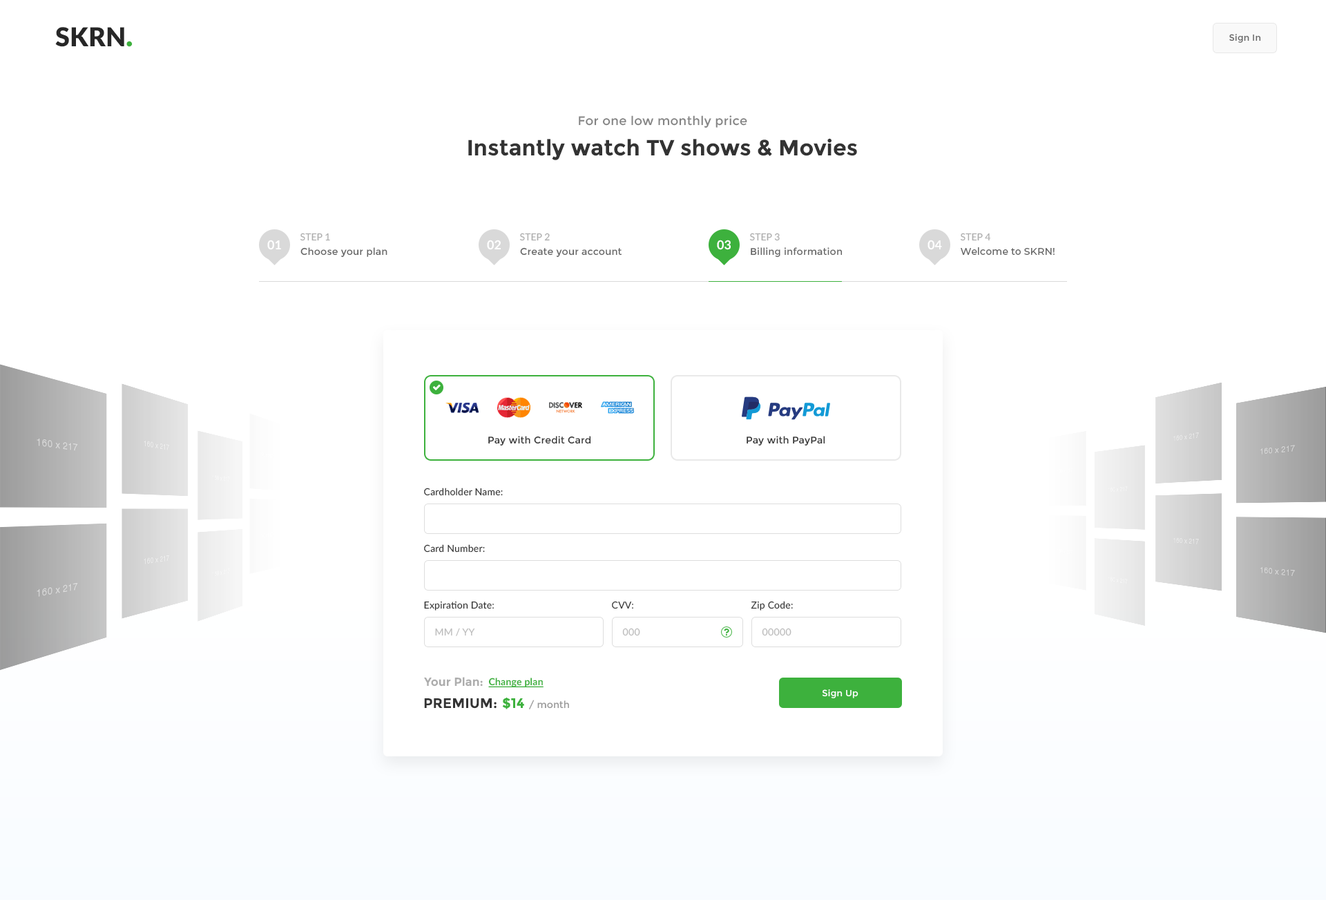
<style>
.page{position:relative;width:1326px;height:900px;background:#ffffff}
.page>*{position:absolute;margin:0}
.t1{font:26px "Lato-Black";color:#272727}
.t2{font:30.4px "Lato-Black";color:#3db13d}
.t3{font:9px "Montserrat-Regular";letter-spacing:0.02em;color:#666666}
.t4{font:12.4px "Montserrat-Regular";letter-spacing:0.017em;color:#848484}
.t5{font:22.1px "Montserrat-Bold";color:#333333}
.t6{font:9.7px "Lato-Regular";color:#adadad}
.t7{font:12.4px "Lato-Bold";color:#ffffff;text-transform:uppercase}
.t8{font:9.7px "Montserrat-Regular";letter-spacing:0.015em;color:#666666}
.t9{font:9.7px "Montserrat-Medium";letter-spacing:0.015em;color:#666666}
.t10{font:9.7px "Montserrat-Regular";letter-spacing:0.017em;color:#333333}
.t11{font:9.7px "Lato-Regular";letter-spacing:0.015em;color:#333333}
.t12{font:9.7px "Lato-Regular";letter-spacing:0.015em;color:#bcbcbc}
.t13{font:9.7px "Lato-Regular";letter-spacing:0.025em;color:#bcbcbc}
.t14{font:11.7px "Montserrat-Bold";color:#adadad}
.t15{font:9.7px "Lato-Bold";letter-spacing:0.017em;color:#3db13d;text-decoration:underline}
.t16{font:9px "Montserrat-Regular";letter-spacing:0.02em;color:#ffffff}
.t17{font:13.8px "Montserrat-Bold";color:#333333;text-transform:uppercase}
.t18{font:9.7px "Montserrat-Regular";color:#999999}
.t19{font:13.8px "Montserrat-Bold";color:#3db13d}
</style>
<div class="page">
<p class="t1" style="left:55px;top:27px;width:78px;height:20px">SKRN<span class="t2">.</span></p>
<p class="t3" style="left:1229px;top:34px;width:32px;height:9px">Sign In</p>
<p class="t4" style="left:579px;top:115px;width:168px;height:13px">For one low monthly price</p>
<p class="t5" style="left:468px;top:138px;width:389px;height:22px">Instantly watch TV shows &amp; Movies</p>
<p class="t6" style="left:300px;top:233px;width:30px;height:8px">STEP 1</p>
<p class="t6" style="left:519px;top:233px;width:31px;height:8px">STEP 2</p>
<p class="t6" style="left:749px;top:233px;width:30px;height:8px">STEP 3</p>
<p class="t6" style="left:960px;top:233px;width:31px;height:8px">STEP 4</p>
<p class="t7" style="left:267px;top:240px;width:14px;height:10px">01</p>
<p class="t7" style="left:487px;top:240px;width:14px;height:10px">02</p>
<p class="t7" style="left:717px;top:240px;width:13px;height:10px">03</p>
<p class="t7" style="left:927px;top:240px;width:15px;height:10px">04</p>
<p class="t8" style="left:300px;top:247px;width:87px;height:11px">Choose your plan</p>
<p class="t8" style="left:520px;top:247px;width:102px;height:11px">Create your account</p>
<p class="t8" style="left:750px;top:247px;width:92px;height:11px">Billing information</p>
<p class="t9" style="left:960px;top:247px;width:94px;height:8px">Welcome to SKRN!</p>
<p class="t10" style="left:488px;top:436px;width:103px;height:9px">Pay with Credit Card</p>
<p class="t10" style="left:746px;top:436px;width:79px;height:9px">Pay with PayPal</p>
<p class="t11" style="left:424px;top:487px;width:79px;height:9px">Cardholder Name:</p>
<p class="t11" style="left:424px;top:544px;width:61px;height:8px">Card Number:</p>
<p class="t11" style="left:424px;top:601px;width:70px;height:9px">Expiration Date:</p>
<p class="t11" style="left:612px;top:601px;width:21px;height:8px">CVV:</p>
<p class="t11" style="left:750px;top:601px;width:43px;height:9px">Zip Code:</p>
<p class="t12" style="left:435px;top:628px;width:40px;height:8px">MM / YY</p>
<p class="t13" style="left:622px;top:628px;width:18px;height:8px">000</p>
<p class="t13" style="left:761px;top:628px;width:30px;height:8px">00000</p>
<p class="t14" style="left:424px;top:677px;width:59px;height:9px">Your Plan:</p>
<p class="t15" style="left:488px;top:677px;width:55px;height:11px">Change plan</p>
<p class="t16" style="left:822px;top:689px;width:36px;height:9px">Sign Up</p>
<p class="t17" style="left:424px;top:698px;width:72px;height:10px">premium:</p>
<p class="t18" style="left:502px;top:697px;width:67px;height:12px"><span class="t19">$14 </span>/ month</p>
</div>
